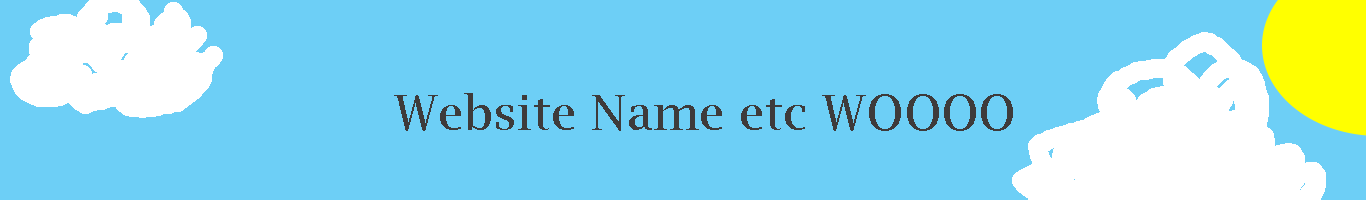
<style>
.page{position:relative;width:1366px;height:200px;background:#6dcff6}
.page>*{position:absolute;margin:0}
.t1{font:48px "LucidaBright";color:#3e3b3b}
</style>
<div class="page">
<p class="t1" style="left:394px;top:93px;width:619px;height:38px">Website Name etc WOOOO</p>
</div>
